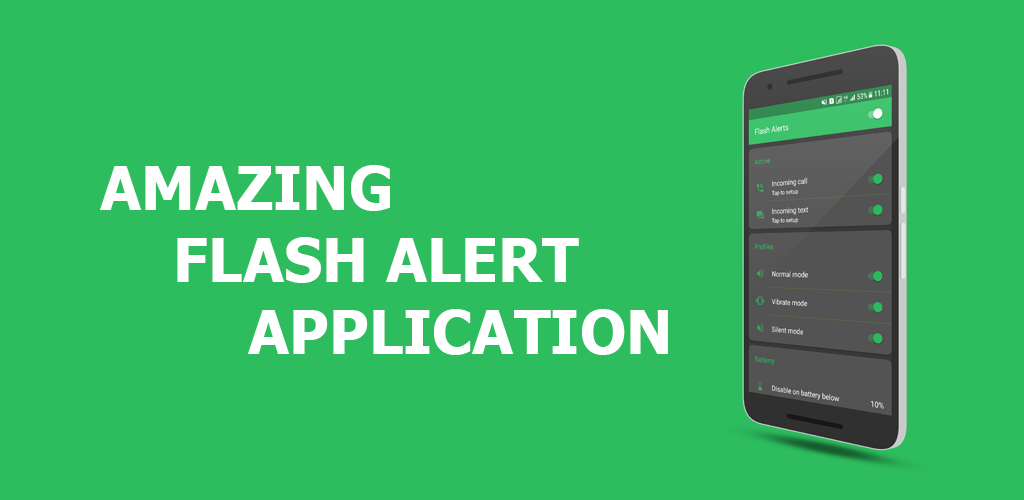
<style>
.page{position:relative;width:1024px;height:500px;background:#2dbd5f}
.page>*{position:absolute;margin:0}
.t1{font:60px "Tahoma-Bold";color:#ffffff}
.t2{font:71.9px "Tahoma";color:#ffffff}
</style>
<div class="page">
<p class="t1" style="left:100px;top:165px;width:568px;height:190px"><span class="t2">   </span>AMAZING <br>        FLASH ALERT<br>      APPLICATION</p>
</div>
